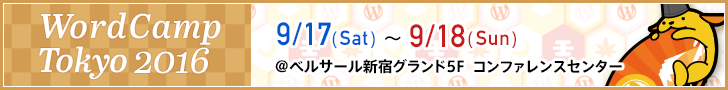
<style>
.page{position:relative;width:728px;height:90px;background:#ffffff}
.page>*{position:absolute;margin:0}
.t1{font:34.2px/34px "AbrilText-SemiBoldItalic";letter-spacing:0.05em;color:#ffffff}
.t2{font:34.2px/34px "AbrilText-SemiBoldItalic";color:#ffffff}
.t3{font:31.6px "DINAlternate-Bold";letter-spacing:0.025em;color:#0058d0}
.t4{font:16.9px "AxisStd-Regular";letter-spacing:0.025em;color:#0058d0}
.t5{font:20.3px "DINAlternate-Bold";letter-spacing:0.025em;color:#0058d0}
.t6{font:19.9px "AxisStd-Regular";letter-spacing:0.025em;color:#000000}
.t7{font:31.6px "DINAlternate-Bold";letter-spacing:0.025em;color:#c81b1b}
.t8{font:16.9px "AxisStd-Regular";letter-spacing:0.025em;color:#c81b1b}
.t9{font:20.3px "DINAlternate-Bold";letter-spacing:0.025em;color:#c81b1b}
.t10{font:39px "AbrilText-Italic";color:#ffffff}
.t11{font:15px "AxisStd-Bold";color:#000000}
</style>
<div class="page">
<p class="t1" style="left:39px;top:12px;width:182px;height:68px">WordCamp<br><span class="t2">Tokyo</span></p>
<p class="t3" style="left:277px;top:22px;width:239px;height:27px">9/17<span class="t4">(</span><span class="t5">Sat</span><span class="t4">)</span><span class="t6">〜</span><span class="t7">9/18</span><span class="t8">(</span><span class="t9">Sun</span><span class="t8">)</span></p>
<p class="t10" style="left:134px;top:47px;width:75px;height:27px">2016</p>
<p class="t11" style="left:275px;top:59px;width:347px;height:15px">@ベルサール新宿グランド5F  コンファレンスセンター</p>
</div>
